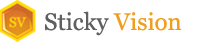
<style>
.page{position:relative;width:200px;height:42px;background:#ffffff}
.page>*{position:absolute;margin:0}
.t1{font:24px "Georgia";color:#5f5f5f}
.t2{font:24px "Georgia";color:#f19e1f}
</style>
<div class="page">
<p class="t1" style="left:45px;top:11px;width:137px;height:25px">Sticky <span class="t2">Vision</span></p>
</div>
